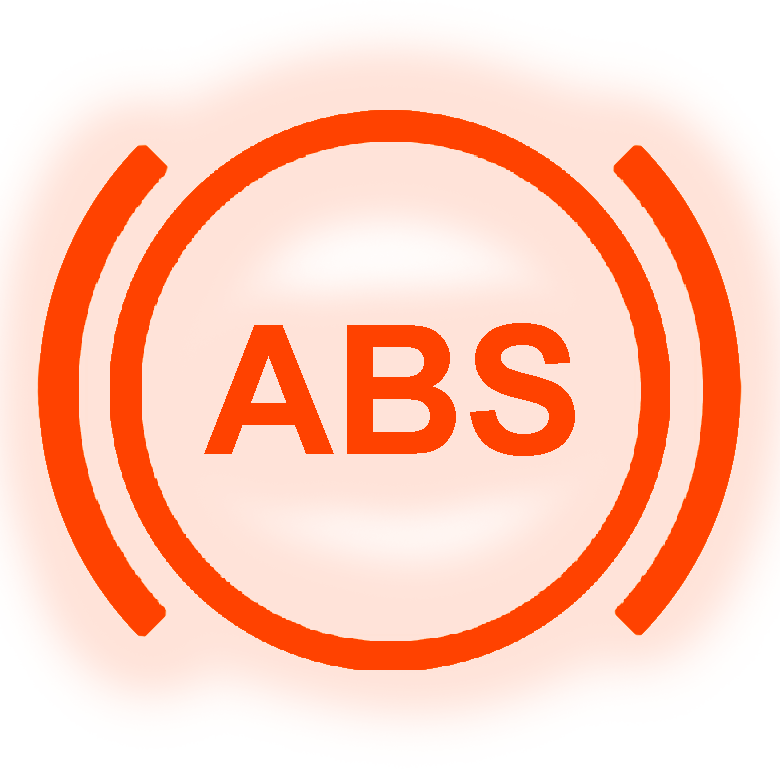
<style>
.page{position:relative;width:780px;height:780px;background:#ffe3d9}
.page>*{position:absolute;margin:0}
.t1{font:180px "Arial-BoldMT";color:#ff4200}
</style>
<div class="page">
<p class="t1" style="left:204px;top:323px;width:371px;height:133px">ABS</p>
</div>
